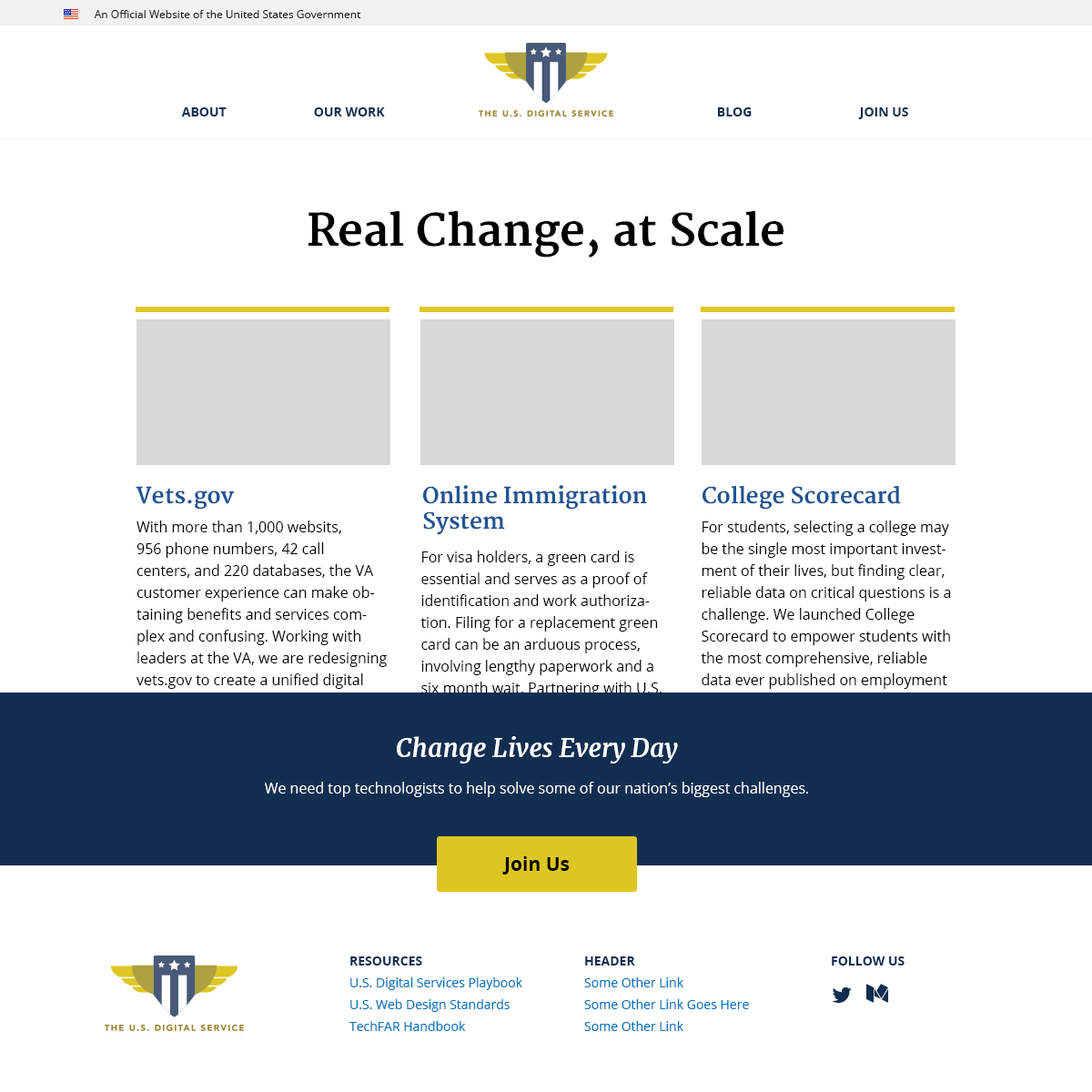
<style>
.page{position:relative;width:1092px;height:1092px;background:#ffffff}
.page>*{position:absolute;margin:0}
.t1{font:10.9px "OpenSans";color:#212121}
.t2{font:12.7px "OpenSans-Bold";color:#112e51;text-transform:uppercase}
.t3{font:43.7px "Merriweather-Bold";color:#000000}
.t4{font:21.8px "Merriweather-Bold";color:#205493}
.t5{font:21.8px/25.5px "Merriweather-Bold";color:#205493}
.t6{font:14.6px/21.8px "OpenSans";color:#000000}
.t7{font:25.5px "Merriweather-BoldItalic";color:#ffffff}
.t8{font:14.6px "OpenSans";color:#ffffff}
.t9{font:19.1px "OpenSans-Bold";color:#000000}
.t10{font:12.7px/21.8px "OpenSans";color:#0071bc}
.t11{font:12.7px/21.8px "OpenSans-Bold";color:#112e51;text-transform:uppercase}
</style>
<div class="page">
<p class="t1" style="left:94px;top:10px;width:267px;height:8px">An Official Website of the United States Government</p>
<p class="t2" style="left:181px;top:107px;width:46px;height:9px">About</p>
<p class="t2" style="left:314px;top:107px;width:71px;height:9px">our work</p>
<p class="t2" style="left:717px;top:107px;width:35px;height:9px">BLOG</p>
<p class="t2" style="left:858px;top:107px;width:50px;height:12px">JOIN US</p>
<p class="t3" style="left:308px;top:210px;width:475px;height:48px">Real Change, at Scale</p>
<p class="t4" style="left:136px;top:486px;width:98px;height:24px">Vets.gov</p>
<p class="t5" style="left:423px;top:485px;width:224px;height:50px">Online Immigration<br>System</p>
<p class="t4" style="left:703px;top:486px;width:198px;height:24px">College Scorecard</p>
<p class="t6" style="left:136px;top:521px;width:251px;height:208px">With more than 1,000 websits, <br>956 phone numbers, 42 call <br>centers, and 220 databases, the VA customer experience can make obtaining benefits and services complex and confusing. Working with leaders at the VA, we are redesigning vets.gov to create a unified digital experience that provides veterans with the resources and information they</p>
<p class="t6" style="left:701px;top:521px;width:250px;height:208px">For students, selecting a college may be the single most important investment of their lives, but finding clear, reliable data on critical questions is a challenge. We launched College Scorecard to empower students with the most comprehensive, reliable data ever published on employment outcomes and success in repaying student loans. 1.4+ million students</p>
<p class="t6" style="left:420px;top:551px;width:242px;height:188px">For visa holders, a green card is <br>essential and serves as a proof of identification and work authorization. Filing for a replacement green card can be an arduous process, involving lengthy paperwork and a six month wait. Partnering with U.S. Citizenship and Immigration <br>Services, we launched</p>
<p class="t7" style="left:397px;top:736px;width:281px;height:27px">Change Lives Every Day</p>
<p class="t8" style="left:265px;top:782px;width:543px;height:15px">We need top technologists to help solve some of our nation’s biggest challenges.</p>
<p class="t9" style="left:502px;top:856px;width:68px;height:18px">Join Us</p>
<p class="t10" style="left:349px;top:956px;width:173px;height:75px"><span class="t11">Resources<br></span>U.S. Digital Services Playbook <br>U.S. Web Design Standards<br>TechFAR Handbook</p>
<p class="t10" style="left:584px;top:956px;width:165px;height:75px"><span class="t11">Header<br></span>Some Other Link<br>Some Other Link Goes Here<br>Some Other Link</p>
<p class="t2" style="left:832px;top:956px;width:73px;height:9px">follow us</p>
</div>
